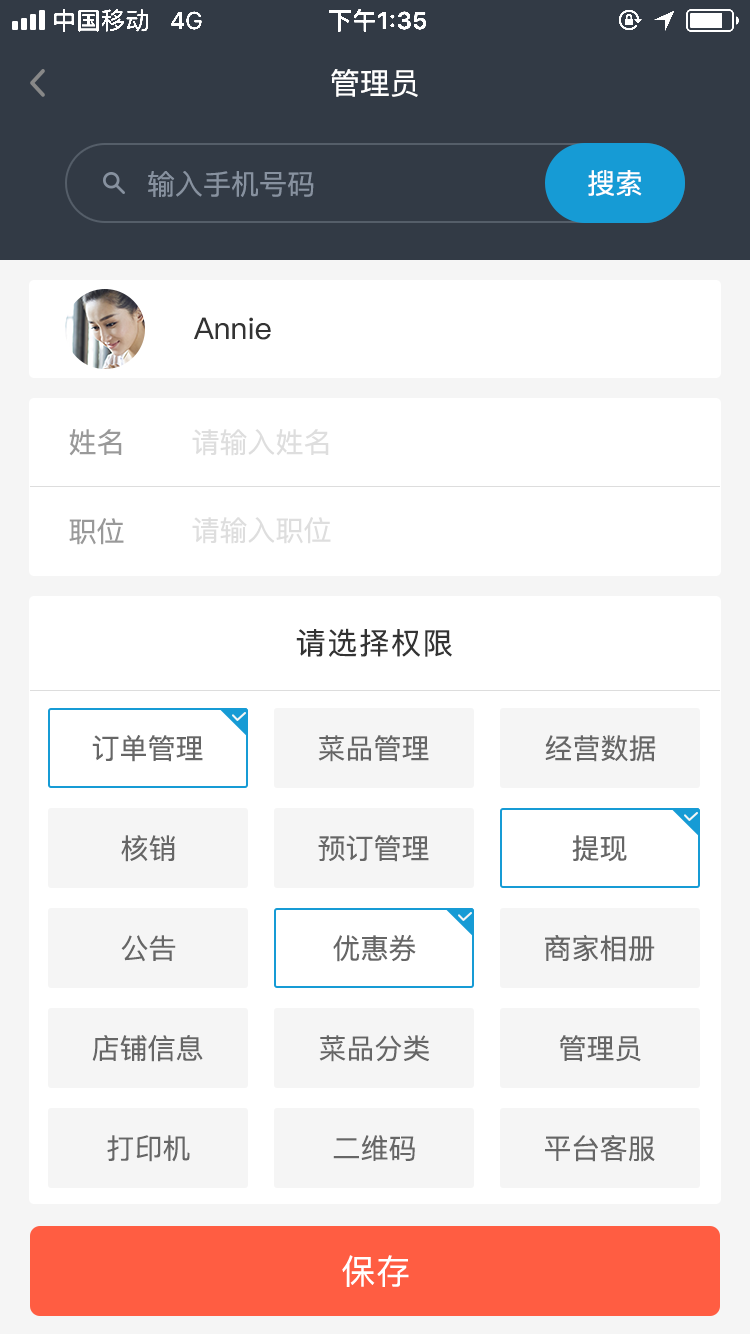
<style>
.page{position:relative;width:750px;height:1334px;background:#ffffff}
.page>*{position:absolute;margin:0}
.t1{font:30px "PingFangSC-Regular";color:#ffffff}
.t2{font:28px "PingFangSC-Regular";color:#87919f}
.t3{font:28px "PingFangSC-Regular";color:#ffffff}
.t4{font:30px "PingFangSC-Regular";color:#333333}
.t5{font:28px "PingFangSC-Regular";color:#999999}
.t6{font:28px "PingFangSC-Regular";color:#dedede}
.t7{font:30px "PingFangSC-Regular";letter-spacing:0.06em;color:#333333}
.t8{font:28px "PingFangSC-Regular";color:#666666}
.t9{font:34px "PingFang-SC-Medium";letter-spacing:0.02em;color:#ffffff}
</style>
<div class="page">
<p class="t1" style="left:331px;top:69px;width:87px;height:28px">管理员</p>
<p class="t2" style="left:148px;top:171px;width:166px;height:26px">输入手机号码</p>
<p class="t3" style="left:588px;top:170px;width:54px;height:26px">搜索</p>
<p class="t4" style="left:194px;top:317px;width:77px;height:23px">Annie</p>
<p class="t5" style="left:69px;top:429px;width:53px;height:27px">姓名</p>
<p class="t6" style="left:192px;top:429px;width:137px;height:27px">请输入姓名</p>
<p class="t5" style="left:69px;top:518px;width:55px;height:27px">职位</p>
<p class="t6" style="left:192px;top:517px;width:139px;height:27px">请输入职位</p>
<p class="t7" style="left:296px;top:628px;width:156px;height:29px">请选择权限</p>
<p class="t8" style="left:92px;top:735px;width:111px;height:27px">订单管理</p>
<p class="t8" style="left:318px;top:735px;width:111px;height:27px">菜品管理</p>
<p class="t8" style="left:545px;top:735px;width:111px;height:27px">经营数据</p>
<p class="t8" style="left:121px;top:835px;width:54px;height:27px">核销</p>
<p class="t8" style="left:318px;top:835px;width:111px;height:27px">预订管理</p>
<p class="t8" style="left:572px;top:835px;width:55px;height:27px">提现</p>
<p class="t8" style="left:121px;top:935px;width:55px;height:27px">公告</p>
<p class="t8" style="left:333px;top:935px;width:83px;height:27px">优惠券</p>
<p class="t8" style="left:545px;top:935px;width:110px;height:27px">商家相册</p>
<p class="t8" style="left:92px;top:1035px;width:111px;height:27px">店铺信息</p>
<p class="t8" style="left:319px;top:1035px;width:110px;height:27px">菜品分类</p>
<p class="t8" style="left:559px;top:1035px;width:82px;height:27px">管理员</p>
<p class="t8" style="left:107px;top:1135px;width:83px;height:27px">打印机</p>
<p class="t8" style="left:333px;top:1135px;width:82px;height:26px">二维码</p>
<p class="t8" style="left:545px;top:1135px;width:110px;height:27px">平台客服</p>
<p class="t9" style="left:342px;top:1255px;width:67px;height:32px">保存</p>
</div>
